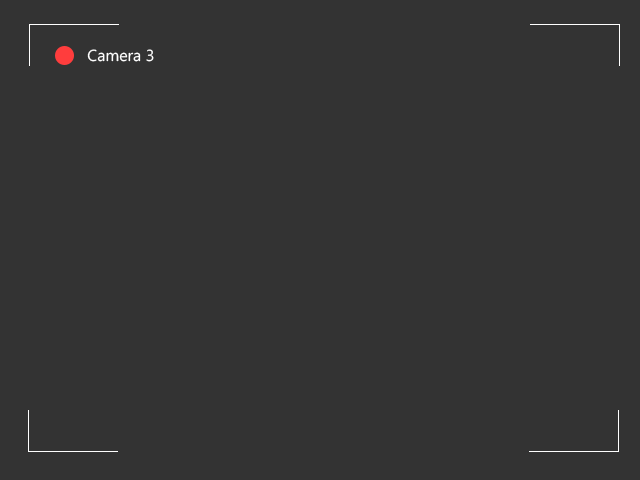
<style>
.page{position:relative;width:640px;height:480px;background:#333333}
.page>*{position:absolute;margin:0}
.t1{font:16px "MicrosoftPhagsPa";color:#ffffff}
</style>
<div class="page">
<p class="t1" style="left:87px;top:49px;width:67px;height:13px">Camera 3</p>
</div>
